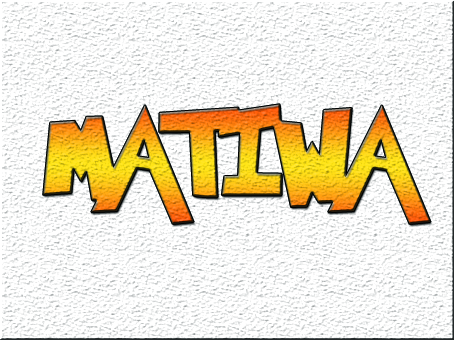
<style>
.page{position:relative;width:454px;height:340px;background:#ffffff}
.page>*{position:absolute;margin:0}
.t1{font:144px "PokemonSolidNormal";font-variant:small-caps}
</style>
<div class="page">
<p class="t1" style="left:43px;top:104px;width:388px;height:120px">matiwa</p>
</div>
